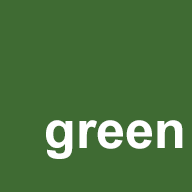
<style>
.page{position:relative;width:192px;height:192px;background:#3f6b33}
.page>*{position:absolute;margin:0}
.t1{font:52px "Arial-BoldMT";color:#ffffff}
</style>
<div class="page">
<p class="t1" style="left:46px;top:120px;width:137px;height:39px">green</p>
</div>
